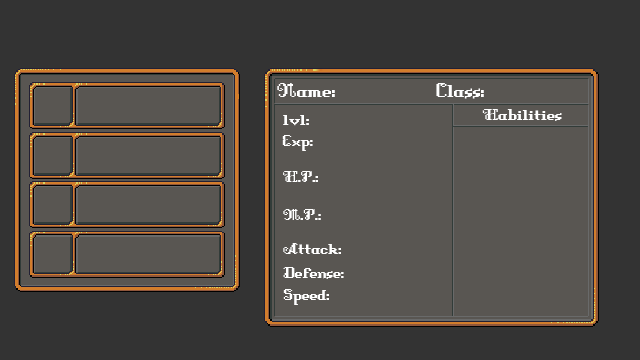
<style>
.page{position:relative;width:640px;height:360px;background:#595652}
.page>*{position:absolute;margin:0}
.t1{font:24px "DungeonFont";color:#ffffff}
.t2{font:20px "DungeonFont";color:#ffffff;scale:1.04 1}
.t3{font:20px "DungeonFont";color:#ffffff}
</style>
<div class="page">
<p class="t1" style="left:277px;top:83px;width:58px;height:14px">Name:</p>
<p class="t1" style="left:436px;top:83px;width:48px;height:16px">Class:</p>
<p class="t2" style="left:482px;top:109px;width:80px;height:12px">Habilities</p>
<p class="t3" style="left:283px;top:115px;width:26px;height:11px">lvl:</p>
<p class="t3" style="left:282px;top:135px;width:31px;height:16px">Exp:</p>
<p class="t3" style="left:283px;top:171px;width:35px;height:11px">H.P.:</p>
<p class="t3" style="left:283px;top:209px;width:38px;height:11px">M.P.:</p>
<p class="t3" style="left:283px;top:243px;width:58px;height:11px">Attack:</p>
<p class="t3" style="left:283px;top:267px;width:61px;height:12px">Defense:</p>
<p class="t3" style="left:283px;top:289px;width:46px;height:16px">Speed:</p>
</div>
